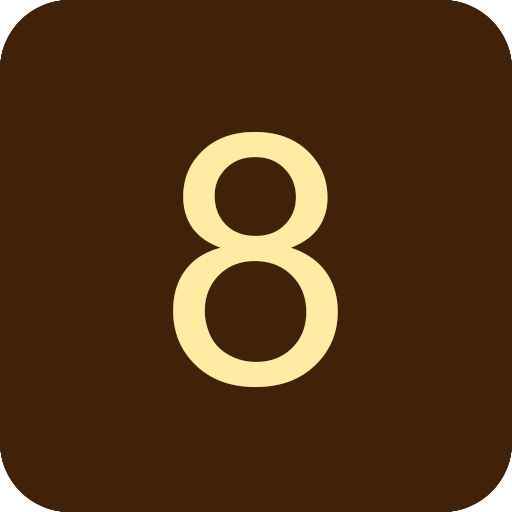
<style>
.page{position:relative;width:512px;height:512px;background:#412209}
.page>*{position:absolute;margin:0}
.t1{font:349px "ArialMT";color:#ffeba1}
</style>
<div class="page">
<p class="t1" style="left:173px;top:132px;width:165px;height:255px">8</p>
</div>
